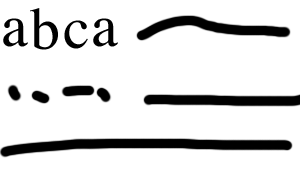
<style>
.page{position:relative;width:300px;height:180px;background:#ffffff}
.page>*{position:absolute;margin:0}
.t1{font:60px "Times-Roman";color:#000000}
</style>
<div class="page">
<p class="t1" style="left:30px;top:8px;width:28px;height:42px">b</p>
<p class="t1" style="left:3px;top:18px;width:25px;height:29px">a</p>
<p class="t1" style="left:64px;top:20px;width:24px;height:29px">c</p>
<p class="t1" style="left:93px;top:18px;width:25px;height:29px">a</p>
</div>
